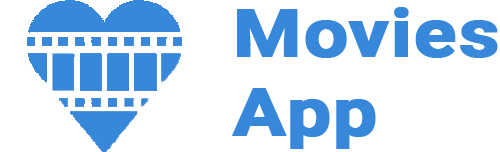
<style>
.page{position:relative;width:500px;height:152px;background:#ffffff}
.page>*{position:absolute;margin:0}
.t1{font:65.8px "Roboto-Bold";color:#3788db;font-weight:bold;scale:1.19 1}
</style>
<div class="page">
<p class="t1" style="left:232px;top:7px;width:266px;height:142px">Movies<br>App</p>
</div>
